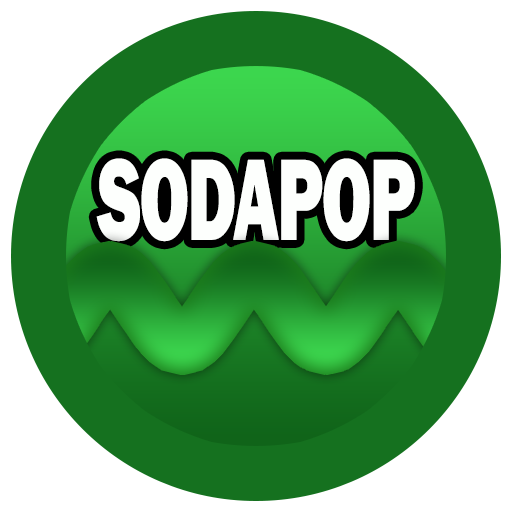
<style>
.page{position:relative;width:512px;height:512px;background:#15711f}
.page>*{position:absolute;margin:0}
.t1{font:120px "FranklinGothic-Heavy";letter-spacing:-0.025em;color:#fdfffd;scale:0.6 1}
</style>
<div class="page">
<p class="t1" style="left:96px;top:158px;width:319px;height:84px">SODAPOP</p>
</div>
